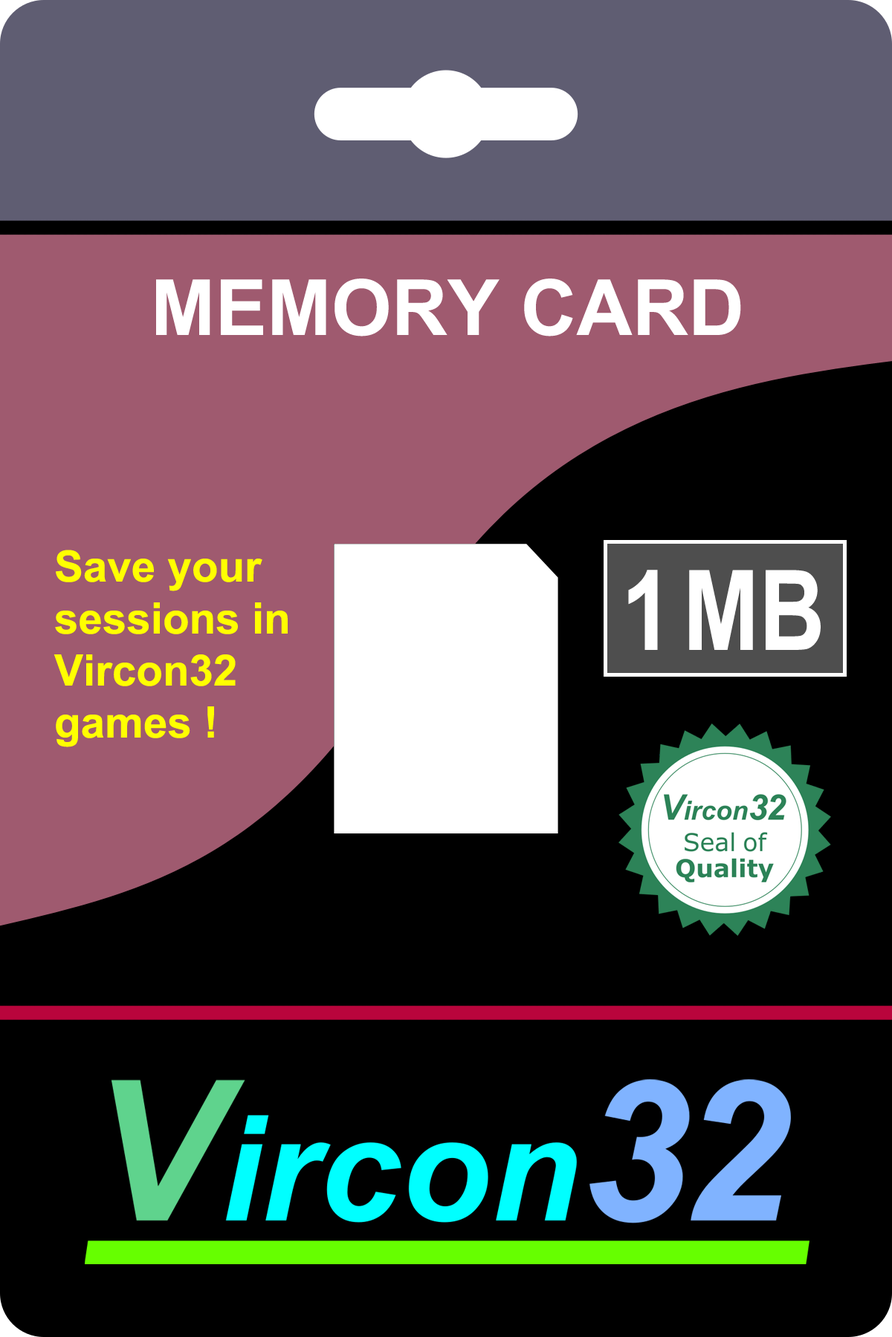
<style>
.page{position:relative;width:892px;height:1337px;background:#000000}
.page>*{position:absolute;margin:0}
.t1{font:77.4px "Arial-BoldMT";color:#ffffff}
.t2{font:43.3px "Arial-BoldMT";color:#ffff00}
.t3{font:111.5px "ArialNarrow-Bold";color:#ffffff}
</style>
<div class="page">
<p class="t1" style="left:156px;top:279px;width:585px;height:58px">MEMORY CARD</p>
<p class="t2" style="left:53px;top:550px;width:235px;height:197px">Save your<br>sessions in<br>Vircon32<br>games !</p>
<p class="t3" style="left:628px;top:570px;width:192px;height:80px">1 MB</p>
</div>
